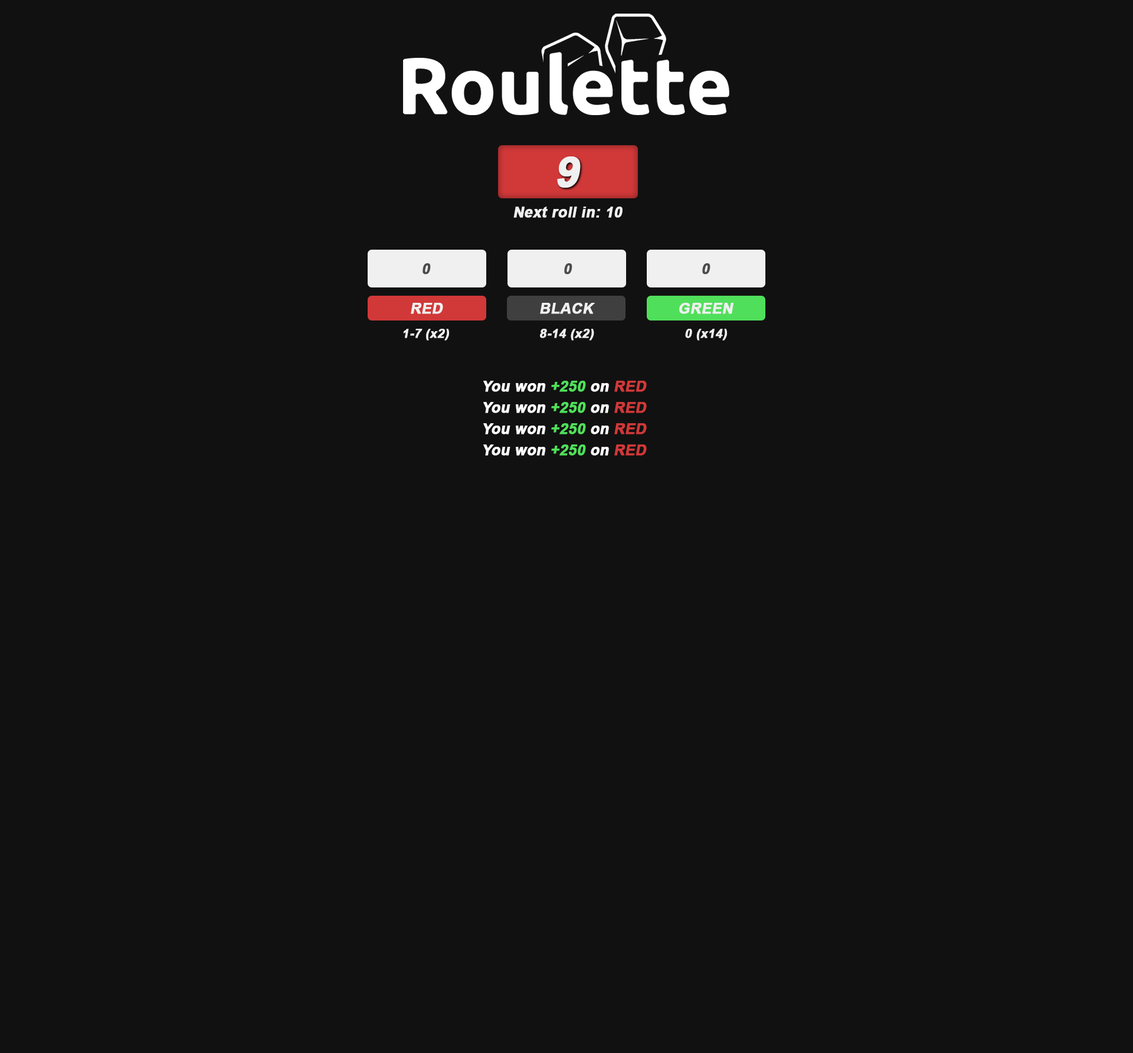
<style>
.page{position:relative;width:1133px;height:1053px;background:#111111}
.page>*{position:absolute;margin:0}
.t1{font:42.1px "Arial-BoldMT";color:#f0f0f0;font-weight:bold;font-style:italic}
.t2{font:14.9px "Arial-BoldMT";color:#f0f0f0;font-weight:bold;font-style:italic}
.t3{font:14.9px "Arial-BoldMT";color:#4b4b4b;font-weight:bold;font-style:italic}
.t4{font:12.7px "Arial-BoldMT";color:#f0f0f0;font-weight:bold;font-style:italic}
.t5{font:14.9px "Arial-BoldMT";color:#ffffff;font-weight:bold;font-style:italic}
.t6{font:14.9px "Arial-BoldMT";color:#50df5b;font-weight:bold;font-style:italic}
.t7{font:14.9px "Arial-BoldMT";color:#d13838;font-weight:bold;font-style:italic}
</style>
<div class="page">
<p class="t1" style="left:557px;top:156px;width:24px;height:32px">9</p>
<p class="t2" style="left:513px;top:207px;width:109px;height:11px">Next roll in: 10</p>
<p class="t3" style="left:422px;top:263px;width:9px;height:11px">0</p>
<p class="t3" style="left:564px;top:263px;width:8px;height:11px">0</p>
<p class="t3" style="left:702px;top:263px;width:8px;height:11px">0</p>
<p class="t2" style="left:411px;top:303px;width:32px;height:11px">RED</p>
<p class="t2" style="left:540px;top:303px;width:55px;height:11px">BLACK</p>
<p class="t2" style="left:679px;top:303px;width:54px;height:11px">GREEN</p>
<p class="t4" style="left:403px;top:329px;width:46px;height:11px">1-7 (x2)</p>
<p class="t4" style="left:540px;top:329px;width:54px;height:11px">8-14 (x2)</p>
<p class="t4" style="left:685px;top:329px;width:42px;height:11px">0 (x14)</p>
<p class="t5" style="left:483px;top:381px;width:164px;height:11px">You won <span class="t6">+250 </span>on <span class="t7">RED</span></p>
<p class="t5" style="left:483px;top:402px;width:164px;height:11px">You won <span class="t6">+250 </span>on <span class="t7">RED</span></p>
<p class="t5" style="left:483px;top:423px;width:164px;height:11px">You won <span class="t6">+250 </span>on <span class="t7">RED</span></p>
<p class="t5" style="left:483px;top:444px;width:164px;height:11px">You won <span class="t6">+250 </span>on <span class="t7">RED</span></p>
</div>
